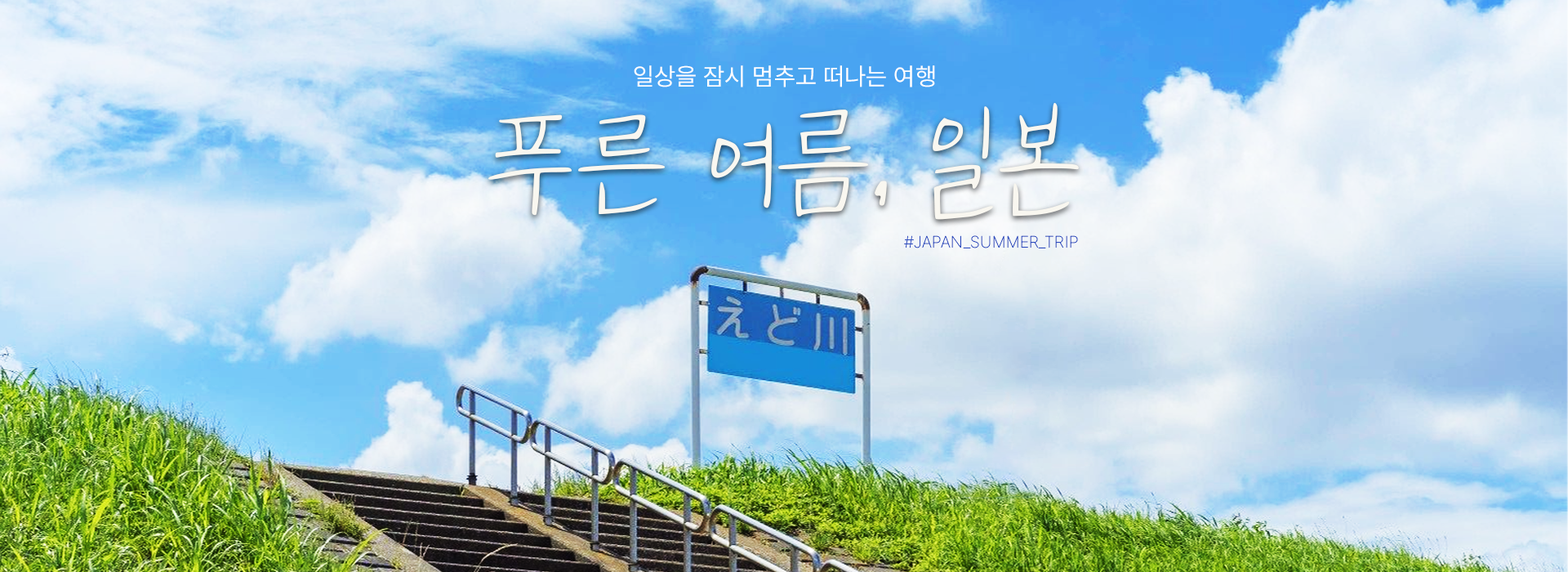
<style>
.page{position:relative;width:1568px;height:572px}
.page>*{position:absolute;margin:0}
.t1{font:24.5px "Pretendard-Regular";letter-spacing:0.01em;color:#ffffff;text-transform:uppercase}
.t2{font:133px "NanumGaRamYeonGgoc";color:#f9f7f0;text-transform:uppercase}
.t3{font:16.3px "Pretendard-Thin";letter-spacing:0.01em;color:#2a4abe;text-transform:uppercase}
</style>
<div class="page">
<p class="t1" style="left:634px;top:65px;width:301px;height:22px">일상을 잠시 멈추고 떠나는 여행</p>
<p class="t2" style="left:488px;top:102px;width:591px;height:118px">푸른 여름, 일본</p>
<p class="t3" style="left:904px;top:235px;width:174px;height:13px">#JAPAN_SUMMER_TRIP</p>
</div>
